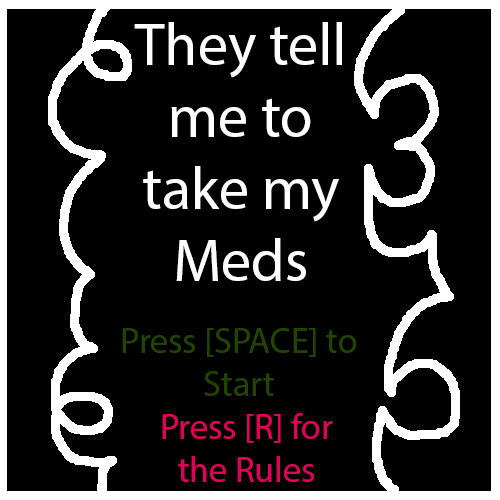
<style>
.page{position:relative;width:500px;height:500px;background:#000000}
.page>*{position:absolute;margin:0}
.t1{font:60px "MyriadPro-Regular";color:#ffffff}
.t2{font:36px "MyriadPro-Regular";color:#214500}
.t3{font:36px "MyriadPro-Regular";color:#e3005b}
</style>
<div class="page">
<p class="t1" style="left:134px;top:22px;width:208px;height:259px;text-align:center">They tell me to take my Meds</p>
<p class="t2" style="left:122px;top:328px;width:235px;height:68px;text-align:center">Press [SPACE] to Start</p>
<p class="t3" style="left:162px;top:413px;width:171px;height:69px;text-align:center">Press [R] for the Rules</p>
</div>
